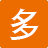
<style>
.page{position:relative;width:48px;height:48px;background:#ed6c00}
.page>*{position:absolute;margin:0}
.t1{font:35px "STHeiti";color:#ffffff}
</style>
<div class="page">
<p class="t1" style="left:10px;top:8px;width:29px;height:32px">多</p>
</div>
